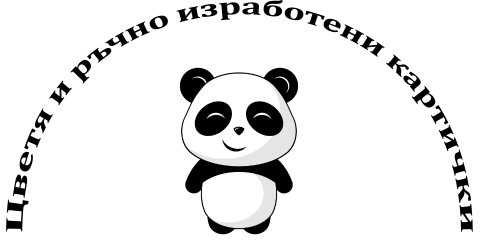
<style>
.page{position:relative;width:500px;height:250px;background:#ffffff}
.page>*{position:absolute;margin:0}
.t1{font:24px "Cambria-Bold";color:#000000}
</style>
<div class="page">
<p class="t1" style="left:6px;top:0px;width:467px;height:232px">Цветя и ръчно изработени картички</p>
</div>
